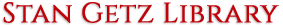
<style>
.page{position:relative;width:283px;height:25px;background:#ffffff}
.page>*{position:absolute;margin:0}
.t1{font:28px "Cinzel-Regular";color:#c00209;font-weight:bold}
</style>
<div class="page">
<p class="t1" style="left:3px;top:2px;width:276px;height:21px">Stan Getz Library</p>
</div>
